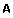
<style>
.page{position:relative;width:13px;height:18px;background:#ffffff}
.page>*{position:absolute;margin:0}
.t1{font:13.2px "Verdana-Bold";letter-spacing:0.01em;color:#000000;scale:0.83 1}
</style>
<div class="page">
<p class="t1" style="left:2px;top:2px;width:9px;height:14px">A</p>
</div>
